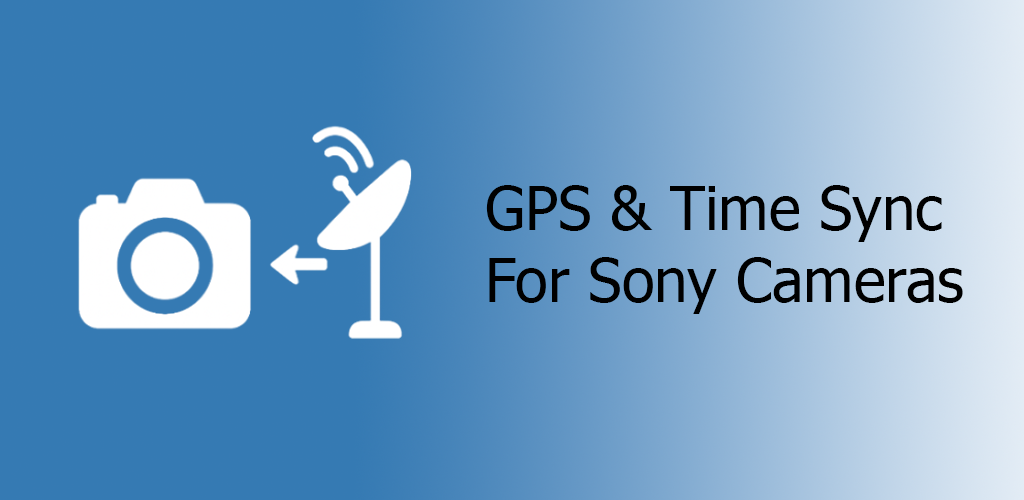
<style>
.page{position:relative;width:1024px;height:500px;background:#357ab3}
.page>*{position:absolute;margin:0}
.t1{font:60px "Tahoma";color:#000000}
</style>
<div class="page">
<p class="t1" style="left:486px;top:185px;width:477px;height:129px;text-align:right">GPS &amp; Time Sync For Sony Cameras</p>
</div>
